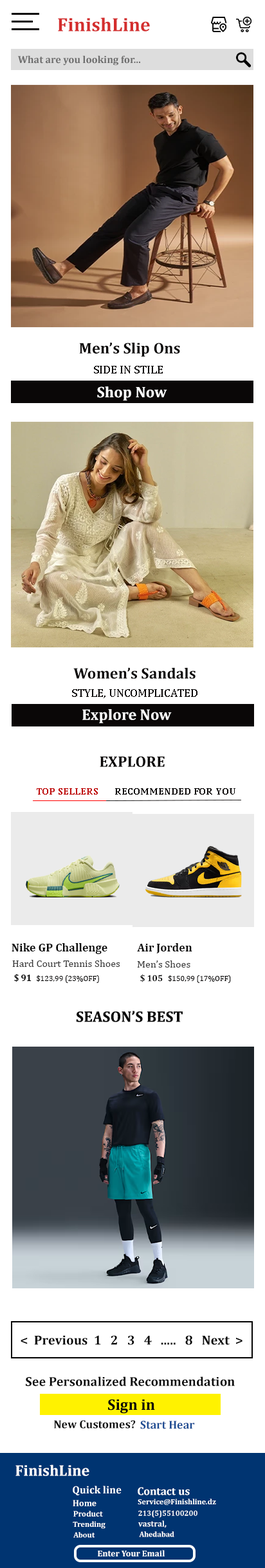
<style>
.page{position:relative;width:265px;height:1568px;background:#ffffff}
.page>*{position:absolute;margin:0}
.t1{font:19.3px "Cambria-Bold";color:#d42e2e}
.t2{font:10.3px "Cambria-Bold";color:#6d6d6d}
.t3{font:15.4px "Cambria-Bold";color:#0a0707}
.t4{font:11.6px "Cambria";color:#0a0707}
.t5{font:15.4px "Cambria-Bold";color:#ffffff}
.t6{font:10.3px "Cambria-Bold";color:#be0c0c}
.t7{font:10.3px "Cambria-Bold";color:#0a0707}
.t8{font:11.6px "Cambria-Bold";color:#080808}
.t9{font:11.6px "Cambria-Bold";color:#0c0a0a}
.t10{font:10.3px "Cambria";color:#3a3a3a}
.t11{font:9px "Cambria-Bold";color:#080808}
.t12{font:7.7px "Cambria";color:#080707}
.t13{font:7.7px "Cambria";color:#0c0a0a}
.t14{font:15.4px "Cambria-Bold";color:#080808}
.t15{font:13.3px "Cambria-Bold";color:#080808}
.t16{font:13px "Cambria-Bold";color:#080808}
.t17{font:11.6px "Cambria-Bold";color:#090a0a}
.t18{font:11.6px "Cambria-Bold";color:#1e4c93}
.t19{font:10.6px "Cambria-Bold";color:#ffffff}
.t20{font:11px "Cambria-Bold";color:#ffffff}
.t21{font:8.8px "Cambria-Bold";color:#ffffff}
.t22{font:7.7px "Cambria-Bold";color:#ffffff}
.t23{font:8px "Cambria-Bold";color:#ffffff}
.t24{font:7.5px "Cambria-Bold";color:#ffffff}
.t25{font:8.4px "Cambria-Bold";color:#ffffff}
.t26{font:7.6px "Cambria-Bold";color:#ffffff}
.t27{font:8.7px "Cambria-Bold";color:#ffffff}
</style>
<div class="page">
<p class="t1" style="left:58px;top:17px;width:92px;height:15px">FinishLine</p>
<p class="t2" style="left:18px;top:55px;width:122px;height:11px">What are you looking for...</p>
<p class="t3" style="left:79px;top:343px;width:101px;height:14px">Men’s Slip Ons</p>
<p class="t4" style="left:94px;top:366px;width:69px;height:8px">SIDE IN STILE</p>
<p class="t5" style="left:97px;top:386px;width:70px;height:15px">Shop Now</p>
<p class="t3" style="left:73px;top:667px;width:122px;height:12px">Women’s Sandals</p>
<p class="t4" style="left:72px;top:689px;width:125px;height:9px">STYLE, UNCOMPLICATED</p>
<p class="t5" style="left:82px;top:709px;width:90px;height:14px">Explore Now</p>
<p class="t3" style="left:100px;top:756px;width:65px;height:11px">EXPLORE</p>
<p class="t6" style="left:37px;top:788px;width:61px;height:7px">TOP SELLERS</p>
<p class="t7" style="left:115px;top:788px;width:120px;height:7px">RECOMMENDED FOR YOU</p>
<p class="t8" style="left:12px;top:943px;width:95px;height:11px">Nike GP Challenge</p>
<p class="t9" style="left:137px;top:943px;width:55px;height:10px">Air Jorden</p>
<p class="t10" style="left:12px;top:960px;width:108px;height:7px">Hard Court Tennis Shoes</p>
<p class="t10" style="left:137px;top:960px;width:53px;height:8px">Men’s Shoes</p>
<p class="t11" style="left:14px;top:974px;width:18px;height:8px">$ 91</p>
<p class="t12" style="left:37px;top:975px;width:62px;height:8px">$123,99 (23%OFF)</p>
<p class="t11" style="left:140px;top:974px;width:23px;height:8px">$ 105</p>
<p class="t13" style="left:168px;top:975px;width:63px;height:8px">$150,99 (17%OFF)</p>
<p class="t14" style="left:76px;top:1011px;width:107px;height:11px">SEASON’S BEST</p>
<p class="t15" style="left:21px;top:1335px;width:221px;height:10px">&lt;  Previous  1   2   3   4   .....   8   Next  &gt;</p>
<p class="t16" style="left:26px;top:1376px;width:209px;height:10px">See Personalized Recommendation</p>
<p class="t14" style="left:108px;top:1399px;width:47px;height:15px">Sign in</p>
<p class="t17" style="left:54px;top:1420px;width:82px;height:8px">New Customes?</p>
<p class="t18" style="left:140px;top:1421px;width:55px;height:8px">Start Hear</p>
<p class="t5" style="left:15px;top:1464px;width:74px;height:12px">FinishLine</p>
<p class="t19" style="left:73px;top:1486px;width:49px;height:9px">Quick line</p>
<p class="t20" style="left:138px;top:1487px;width:52px;height:8px">Contact us</p>
<p class="t21" style="left:73px;top:1500px;width:23px;height:6px">Home</p>
<p class="t22" style="left:138px;top:1499px;width:78px;height:6px">Service@Finishline.dz</p>
<p class="t23" style="left:73px;top:1511px;width:30px;height:6px">Product</p>
<p class="t24" style="left:138px;top:1510px;width:59px;height:8px">213(5)55100200</p>
<p class="t22" style="left:73px;top:1521px;width:32px;height:8px">Trending</p>
<p class="t25" style="left:138px;top:1520px;width:29px;height:8px">vastral,</p>
<p class="t26" style="left:73px;top:1532px;width:22px;height:6px">About</p>
<p class="t26" style="left:139px;top:1531px;width:35px;height:6px">Ahedabad</p>
<p class="t27" style="left:98px;top:1550px;width:67px;height:6px">Enter Your Email</p>
</div>
